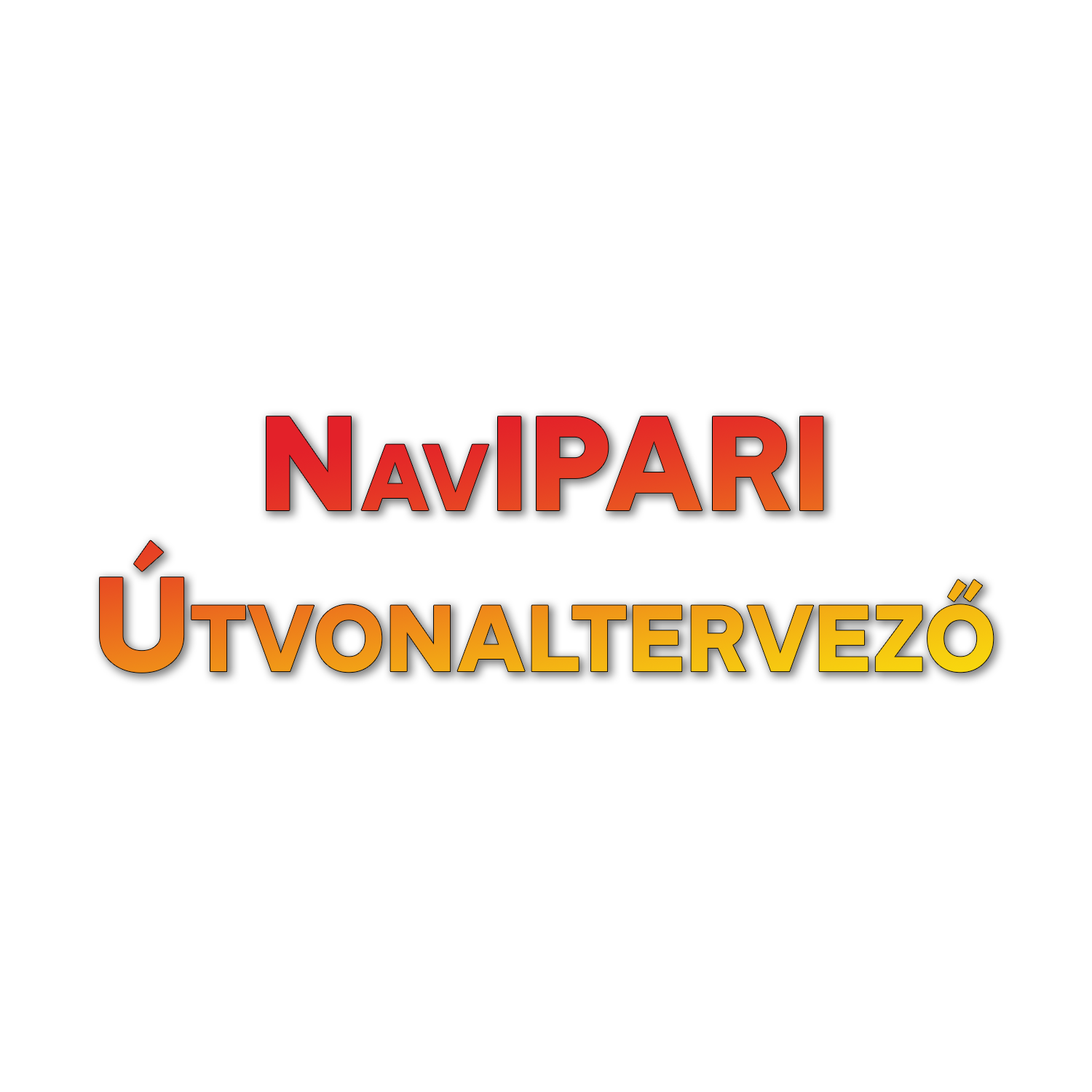
<style>
.page{position:relative;width:1092px;height:1092px;background:#ffffff}
.page>*{position:absolute;margin:0}
.t1{font:134.3px "Daikon-Black";font-variant:small-caps}
</style>
<div class="page">
<p class="t1" style="left:100px;top:416px;width:894px;height:257px;text-align:center">NavIPARI<br>Útvonaltervező</p>
</div>
